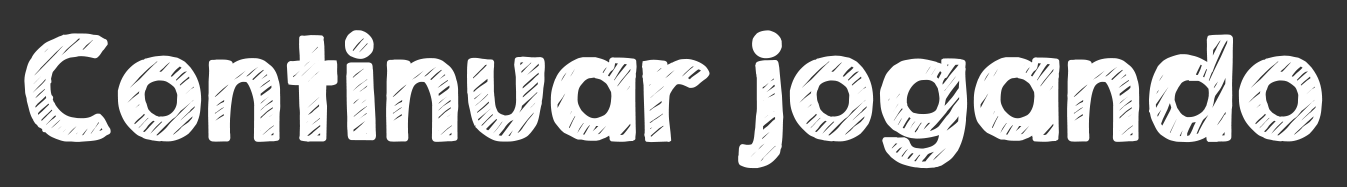
<style>
.page{position:relative;width:1347px;height:187px;background:#333333}
.page>*{position:absolute;margin:0}
.t1{font:125px "KGSecondChancesSketch";color:#ffffff;font-weight:bold}
</style>
<div class="page">
<p class="t1" style="left:24px;top:30px;width:1299px;height:139px">Continuar jogando</p>
</div>
